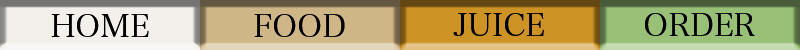
<style>
.page{position:relative;width:800px;height:50px}
.page>*{position:absolute;margin:0}
.t1{font:45px "HiraMinProN-W3";color:#000000;font-variant:small-caps}
</style>
<div class="page">
<p class="t1" style="left:51px;top:14px;width:98px;height:23px">home</p>
<p class="t1" style="left:51px;top:14px;width:98px;height:23px">home</p>
<p class="t1" style="left:254px;top:14px;width:91px;height:23px">food</p>
<p class="t1" style="left:254px;top:14px;width:91px;height:23px">food</p>
<p class="t1" style="left:453px;top:13px;width:91px;height:23px">juice</p>
<p class="t1" style="left:453px;top:13px;width:91px;height:23px">juice</p>
<p class="t1" style="left:645px;top:13px;width:110px;height:23px">order</p>
<p class="t1" style="left:645px;top:13px;width:110px;height:23px">order</p>
</div>
